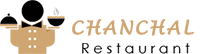
<style>
.page{position:relative;width:200px;height:54px;background:#ffffff}
.page>*{position:absolute;margin:0}
.t1{font:18px "LucidaHandwriting-Italic";letter-spacing:0.075em;color:#cfa671;font-weight:bold}
</style>
<div class="page">
<p class="t1" style="left:72px;top:19px;width:122px;height:17px">CHANCHAL</p>
</div>
